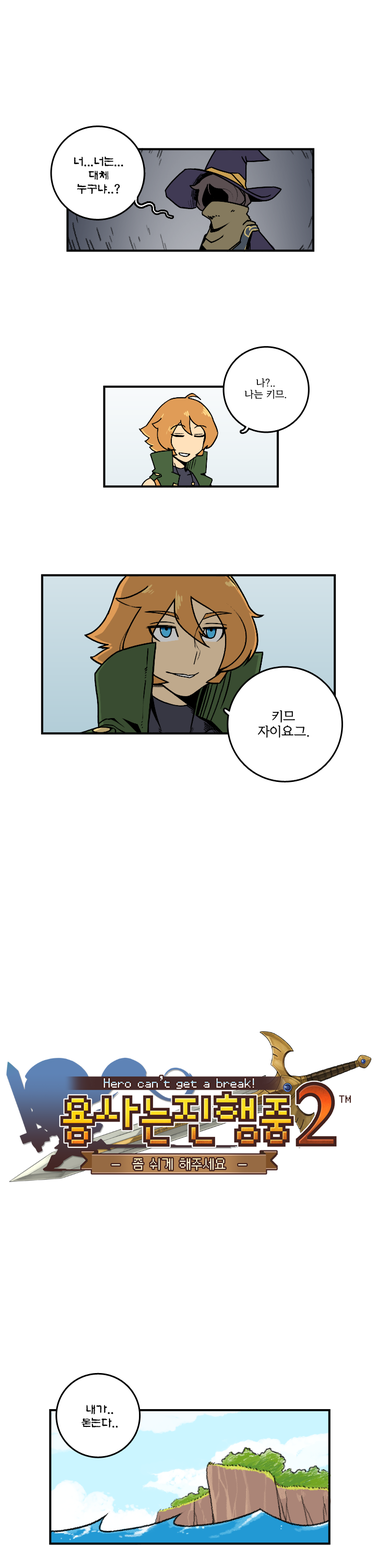
<style>
.page{position:relative;width:376px;height:1568px;background:#ffffff}
.page>*{position:absolute;margin:0}
.t1{font:11.5px "KoreanAS-R";color:#000000}
.t2{font:9.4px "KoreanYMJ-B";color:#000000}
.t3{font:12.5px "KoreanYMJ-B";color:#000000}
</style>
<div class="page">
<p class="t1" style="left:74px;top:156px;width:49px;height:38px;text-align:center">너...너는...<br>대체<br>누구냐..?</p>
<p class="t2" style="left:245px;top:378px;width:41px;height:21px;text-align:center">나?..<br>나는 키므.</p>
<p class="t3" style="left:258px;top:710px;width:51px;height:28px;text-align:center">키므<br>자이요그.</p>
<p class="t1" style="left:82px;top:1404px;width:36px;height:24px;text-align:center">내가..<br>묻는다..</p>
</div>
